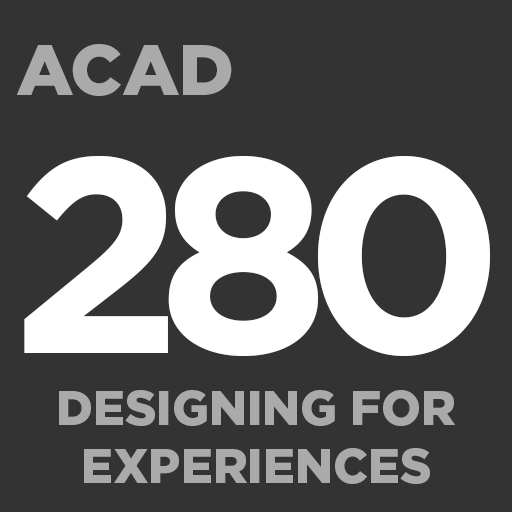
<style>
.page{position:relative;width:512px;height:512px;background:#333333}
.page>*{position:absolute;margin:0}
.t1{font:72px "Gotham-Black";color:#aaaaaa}
.t2{font:277px "Gotham-Bold";letter-spacing:-0.1em;color:#ffffff}
.t3{font:48px "Gotham-Black";color:#aaaaaa}
</style>
<div class="page">
<p class="t1" style="left:16px;top:44px;width:216px;height:52px">ACAD</p>
<p class="t2" style="left:24px;top:155px;width:466px;height:201px">280</p>
<p class="t3" style="left:59px;top:390px;width:396px;height:94px;text-align:center">DESIGNING FOR<br>EXPERIENCES</p>
</div>
